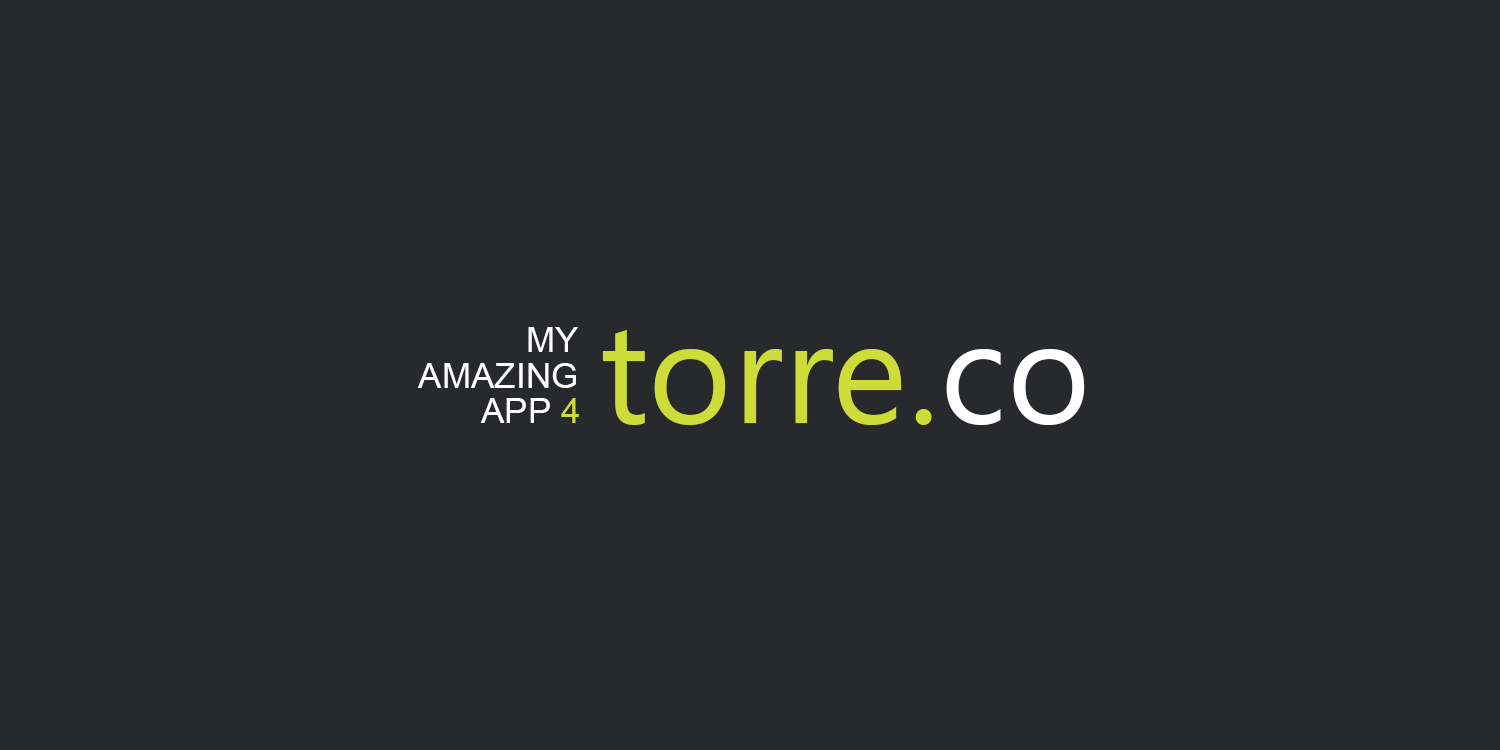
<style>
.page{position:relative;width:1500px;height:750px;background:#27292d}
.page>*{position:absolute;margin:0}
.t1{font:34.8px "ArialMT";letter-spacing:0.005em;color:#ffffff}
.t2{font:143.4px "SegoeUIHistoric";letter-spacing:0.005em;color:#cddc39}
.t3{font:143.4px "SegoeUIHistoric";letter-spacing:0.005em;color:#ffffff}
.t4{font:34.8px "ArialMT";letter-spacing:0.005em;color:#cddc39}
</style>
<div class="page">
<p class="t1" style="left:528px;top:327px;width:50px;height:25px">MY</p>
<p class="t2" style="left:602px;top:330px;width:483px;height:95px">torre.<span class="t3">co</span></p>
<p class="t1" style="left:417px;top:363px;width:159px;height:25px">AMAZING</p>
<p class="t1" style="left:480px;top:398px;width:99px;height:25px">APP <span class="t4">4</span></p>
</div>
